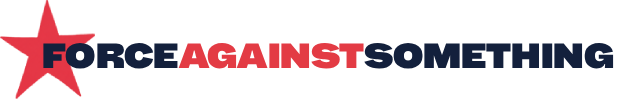
<style>
.page{position:relative;width:620px;height:99px;background:#ffffff}
.page>*{position:absolute;margin:0}
.t1{font:35px "BBHSansHegarty-Regular";color:#13203c}
.t2{font:35px "BBHSansHegarty-Regular";color:#e33b44}
</style>
<div class="page">
<p class="t1" style="left:43px;top:42px;width:571px;height:27px">FORCE<span class="t2">AGAINST</span>SOMETHING</p>
</div>
